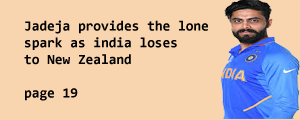
<style>
.page{position:relative;width:300px;height:120px;background:#f8d5ae}
.page>*{position:absolute;margin:0}
.t1{font:14px "Consolas-Bold";color:#000000}
</style>
<div class="page">
<p class="t1" style="left:24px;top:20px;width:184px;height:81px">Jadeja provides the lone<br>spark as india loses<br>to New Zealand<br><br>page 19</p>
</div>
